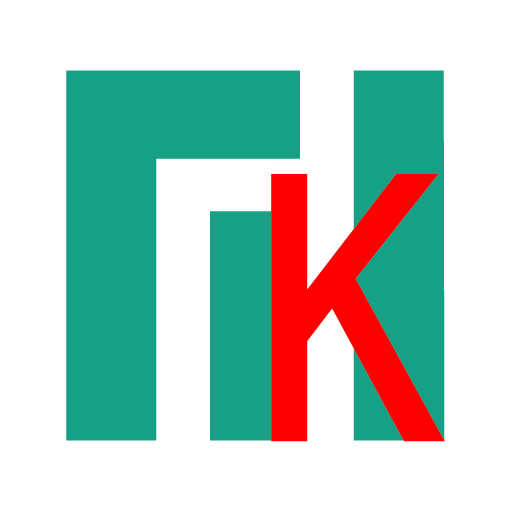
<style>
.page{position:relative;width:512px;height:512px;background:#ffffff}
.page>*{position:absolute;margin:0}
.t1{font:400px "SimHei";color:#ff0000}
</style>
<div class="page">
<p class="t1" style="left:271px;top:174px;width:174px;height:268px">K</p>
</div>
